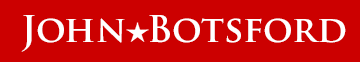
<style>
.page{position:relative;width:360px;height:62px;background:#cc0000}
.page>*{position:absolute;margin:0}
.t1{font:36px "TrajanPro-Bold";color:#ffffff}
</style>
<div class="page">
<p class="t1" style="left:21px;top:15px;width:325px;height:37px">John  Botsford</p>
</div>
